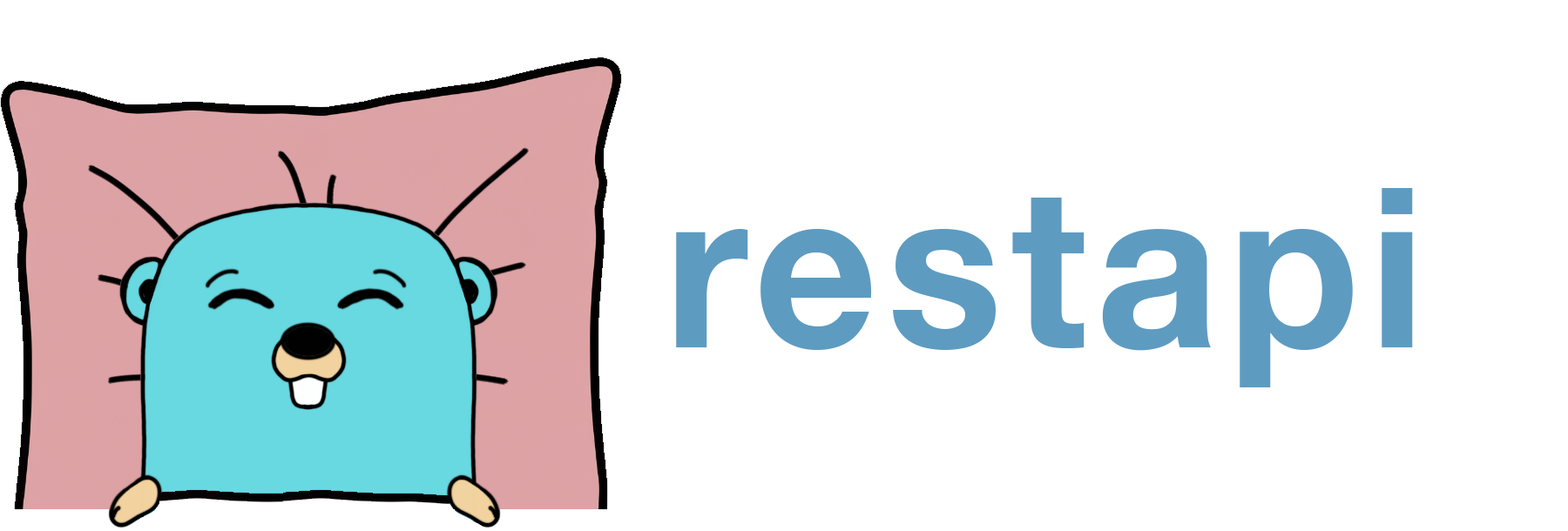
<style>
.page{position:relative;width:1568px;height:531px;background:#ffffff}
.page>*{position:absolute;margin:0}
.t1{font:223px "HelveticaNeue-Bold";letter-spacing:0.045em;color:#5e9bc1;scale:0.96 1}
</style>
<div class="page">
<p class="t1" style="left:676px;top:188px;width:737px;height:200px">restapi</p>
</div>
